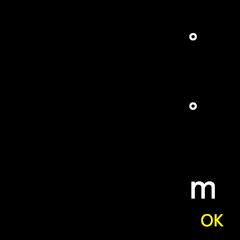
<style>
.page{position:relative;width:240px;height:240px;background:#000000}
.page>*{position:absolute;margin:0}
.t1{font:28.1px "MS-PGothic";color:#ffffff}
.t2{font:37.5px "MS-PGothic";color:#ffffff}
.t3{font:16.8px "MicrosoftNewTaiLue";color:#ffff00}
</style>
<div class="page">
<p class="t1" style="left:189px;top:33px;width:8px;height:8px">°</p>
<p class="t1" style="left:189px;top:102px;width:8px;height:8px">°</p>
<p class="t2" style="left:191px;top:181px;width:24px;height:18px">m</p>
<p class="t3" style="left:201px;top:214px;width:23px;height:13px">OK</p>
</div>
